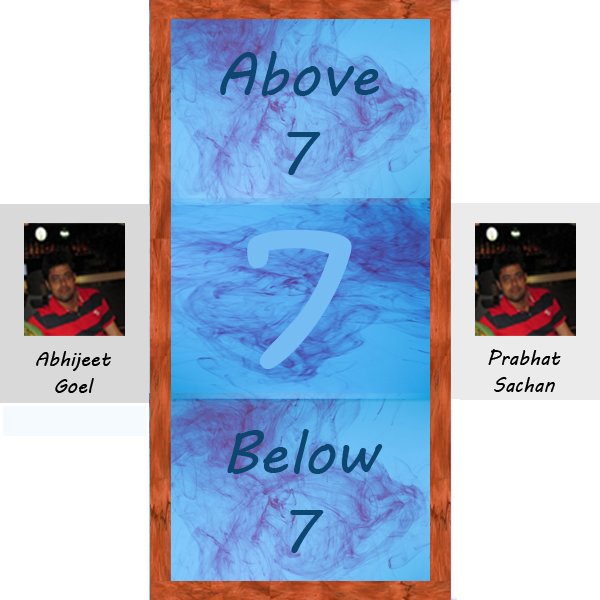
<style>
.page{position:relative;width:600px;height:600px;background:#ffffff}
.page>*{position:absolute;margin:0}
.t1{font:60px/26.8px "MVBoli";color:#0d4670}
.t2{font:200px "KristenITC-Regular";color:#75bcf3}
.t3{font:20px/26.8px "MVBoli";color:#000000}
</style>
<div class="page">
<p class="t1" style="left:220px;top:51px;width:159px;height:124px;text-align:center">Above<br><br><br>7</p>
<p class="t2" style="left:247px;top:229px;width:105px;height:140px">7</p>
<p class="t3" style="left:36px;top:351px;width:75px;height:42px;text-align:center">Abhijeet<br>Goel</p>
<p class="t3" style="left:488px;top:349px;width:73px;height:43px;text-align:center">Prabhat<br>Sachan</p>
<p class="t1" style="left:227px;top:429px;width:156px;height:124px;text-align:center">Below<br><br><br>7</p>
</div>
